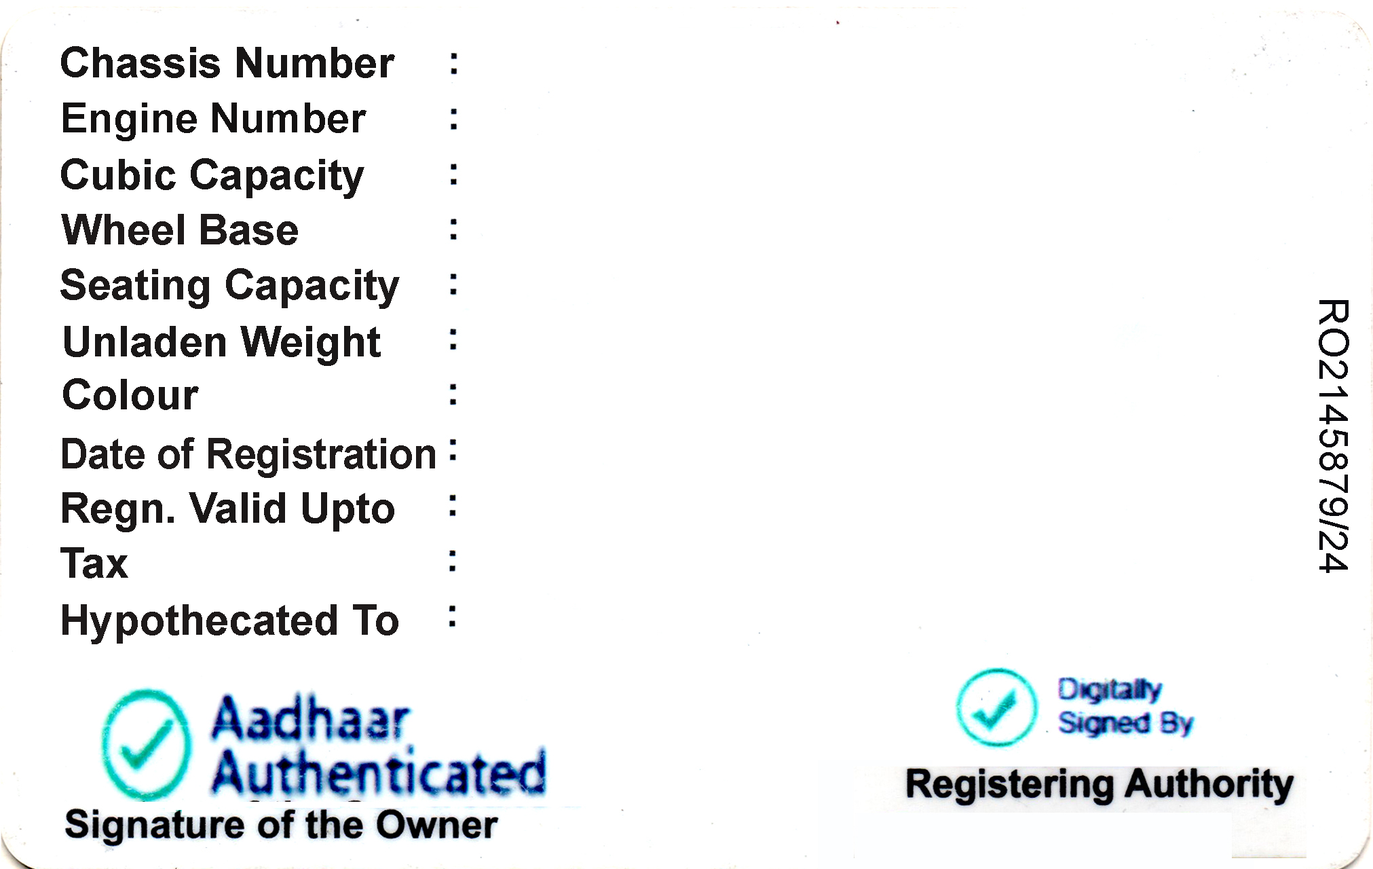
<style>
.page{position:relative;width:1373px;height:869px;background:#ffffff}
.page>*{position:absolute;margin:0}
.t1{font:42.4px "Arial-BoldMT";color:#171515}
.t2{font:41.3px "Arial-BoldMT";color:#131111}
.t3{font:42.4px "Arial-BoldMT";color:#181616}
.t4{font:42.4px "Arial-BoldMT";color:#1e1a1a}
.t5{font:42.4px "Arial-BoldMT";color:#1c1919}
.t6{font:42.4px "Arial-BoldMT";color:#191717}
.t7{font:42.4px "Arial-BoldMT";color:#191616}
.t8{font:42.4px "Arial-BoldMT";color:#1e1a1a;scale:0.94 1}
.t9{font:42.4px "Arial-BoldMT";color:#1a1717}
.t10{font:42.4px "Arial-BoldMT";color:#1b1818}
</style>
<div class="page">
<p class="t1" style="left:61px;top:46px;width:334px;height:32px">Chassis Number</p>
<p class="t2" style="left:63px;top:102px;width:303px;height:39px">Engine Number</p>
<p class="t3" style="left:61px;top:158px;width:303px;height:41px">Cubic Capacity</p>
<p class="t4" style="left:61px;top:214px;width:237px;height:31px">Wheel Base</p>
<p class="t5" style="left:60px;top:268px;width:340px;height:41px">Seating Capacity</p>
<p class="t6" style="left:64px;top:326px;width:317px;height:40px">Unladen Weight</p>
<p class="t7" style="left:63px;top:378px;width:136px;height:32px">Colour</p>
<p class="t8" style="left:62px;top:437px;width:373px;height:41px">Date of Registration</p>
<p class="t9" style="left:62px;top:492px;width:332px;height:40px">Regn. Valid Upto</p>
<p class="t10" style="left:60px;top:547px;width:68px;height:31px">Tax</p>
<p class="t4" style="left:62px;top:604px;width:336px;height:40px">Hypothecated To</p>
</div>
